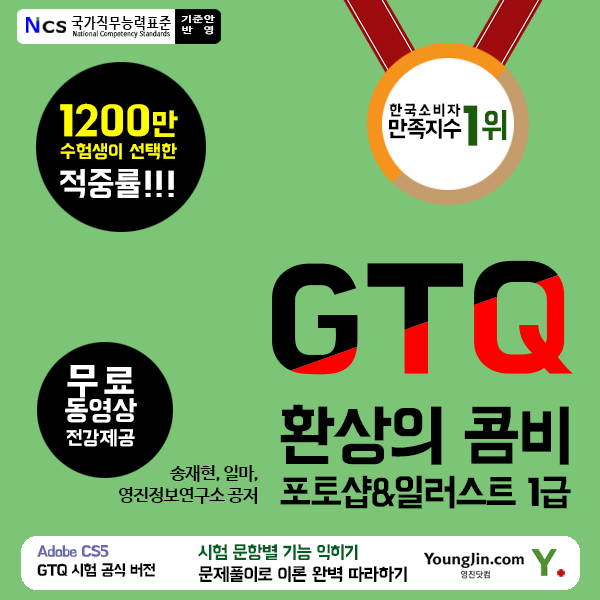
<style>
.page{position:relative;width:600px;height:600px;background:#7cc576}
.page>*{position:absolute;margin:0}
.t1{font:7.1px "NanumBarunGothicBold";letter-spacing:0.05em;color:#010101;scale:0.85 1}
.t2{font:15.6px "NanumBarunGothicBold";letter-spacing:0.05em;color:#010101;scale:0.85 1}
.t3{font:9.3px "NanumBarunGothicBold";letter-spacing:0.05em;color:#ffffff;scale:1.29 1}
.t4{font:9.3px "NanumBarunGothicBold";letter-spacing:0.35em;color:#ffffff;scale:1.29 1}
.t5{font:19px "BMHANNAPro";letter-spacing:-0.01em;color:#fffc01}
.t6{font:43.6px "BMHANNAPro";letter-spacing:-0.01em;color:#fffc01}
.t7{font:32.3px "BMHANNAPro";letter-spacing:-0.01em;color:#fffc01}
.t8{font:34.1px "BMHANNAPro";letter-spacing:-0.01em;color:#ffffff}
.t9{font:20.9px "BMHANNAPro";letter-spacing:-0.01em;color:#000000}
.t10{font:15.8px "BMHANNAPro";letter-spacing:0.09em;color:#000000}
.t11{font:23.7px/20.5px "BMHANNAPro";letter-spacing:-0.05em;color:#000000}
.t12{font:55px "BMHANNAPro";letter-spacing:0.09em;color:#1b5c0a;scale:0.91 1}
.t13{font:35.8px "BMHANNAPro";letter-spacing:0.09em;color:#1b5c0a;scale:0.91 1}
.t14{font:20.3px "BMHANNAPro";letter-spacing:-0.01em;color:#ffffff}
.t15{font:38.7px "BMHANNAPro";letter-spacing:0.09em;color:#ffffff}
.t16{font:28.5px/26.5px "BMHANNAPro";letter-spacing:-0.01em;color:#ffffff}
.t17{font:38.7px "BMHANNAPro";letter-spacing:-0.05em;color:#000000}
.t18{font:69.2px "BMHANNAPro";letter-spacing:-0.05em;color:#000000}
.t19{font:18px "NanumBarunGothicBold";letter-spacing:-0.05em;color:#000000}
.t20{font:16px "BMHANNAPro";letter-spacing:-0.05em;color:#000000}
.t21{font:16px "BMHANNAPro";letter-spacing:-0.05em;color:#6a67ae}
.t22{font:18.7px "BMHANNAPro";letter-spacing:-0.05em;color:#000000}
.t23{font:18.7px "BMHANNAPro";letter-spacing:-0.05em;color:#005e1f}
</style>
<div class="page">
<p class="t1" style="left:71px;top:16px;width:100px;height:23px;text-align:center"><span class="t2">국가직무능력표준<br></span>National Competency Standards</p>
<p class="t3" style="left:181px;top:15px;width:34px;height:20px;text-align:center">기준안<br><span class="t4">반 영</span></p>
<p class="t5" style="left:60px;top:103px;width:118px;height:95px;text-align:center"><span class="t6">1200</span><span class="t7">만<br></span>수험생이 선택한<br><span class="t8">적중률!!!<br></span><span class="t9"><br><br><br><br><br><br><br>적으</span></p>
<p class="t10" style="left:389px;top:103px;width:73px;height:36px;text-align:center">한국소비자<br><span class="t11">만족지수</span></p>
<p class="t12" style="left:463px;top:105px;width:44px;height:41px">1<span class="t13">위</span></p>
<p class="t14" style="left:65px;top:365px;width:72px;height:82px;text-align:center"><span class="t15">무료<br></span><span class="t16">동영상<br></span>전강제공</p>
<p class="t17" style="left:280px;top:404px;width:291px;height:105px;text-align:center"><span class="t18">환상의 콤비<br></span>포토샵&amp;일러스트 1급</p>
<p class="t19" style="left:119px;top:465px;width:139px;height:39px;text-align:right">송재현, 일마,<br>영진정보연구소 공저</p>
<p class="t20" style="left:37px;top:544px;width:118px;height:33px"><span class="t21">Adobe CS5<br></span>GTQ 시험 공식 버전</p>
<p class="t22" style="left:198px;top:544px;width:209px;height:38px"><span class="t23">시험 문항별 기능 익히기<br></span>문제풀이로 이론 완벽 따라하기</p>
</div>
